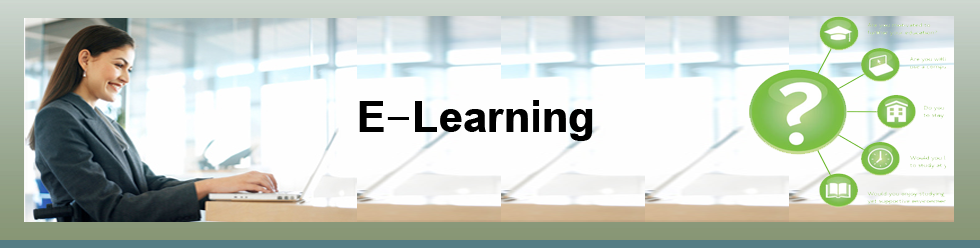
<style>
.page{position:relative;width:980px;height:248px;background:#fefefe}
.page>*{position:absolute;margin:0}
.t1{font:48px "ArabicTransparent-Bold";color:#000000}
</style>
<div class="page">
<p class="t1" style="left:359px;top:100px;width:234px;height:41px">E-Learning</p>
</div>
